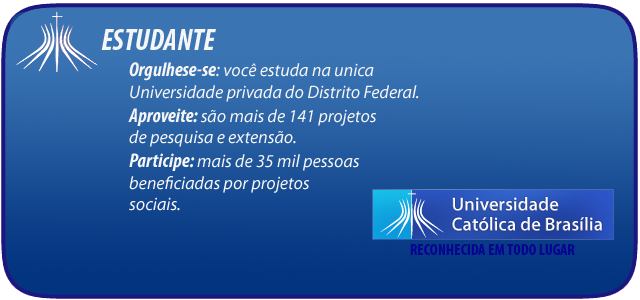
<style>
.page{position:relative;width:640px;height:300px}
.page>*{position:absolute;margin:0}
.t1{font:30px "MyriadPro-BoldCondIt";color:#f6f6f7}
.t2{font:18px "MyriadPro-It";color:#f6f6f7}
.t3{font:20px "MyriadPro-BoldCondIt";color:#f6f6f7}
.t4{font:20px "MyriadPro-It";color:#f6f6f7}
.t5{font:16px "MyriadPro-BoldCond";color:#070492}
</style>
<div class="page">
<p class="t1" style="left:101px;top:29px;width:115px;height:21px">ESTUDANTE</p>
<p class="t2" style="left:128px;top:62px;width:291px;height:149px"><span class="t3">Orgulhese-se</span><span class="t4">:</span> você estuda na unica<br>Universidade privada do Distrito Federal.<br><span class="t3">Aproveite: </span>são mais de 141 projetos <br>de pesquisa e extensão.<br><span class="t3">Participe: </span>mais de 35 mil pessoas <br>beneficiadas por projetos<br>sociais.</p>
<p class="t5" style="left:410px;top:244px;width:165px;height:11px">RECONHECIDA EM TODO LUGAR</p>
</div>
